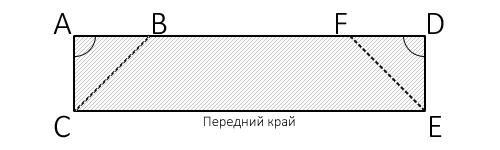
<style>
.page{position:relative;width:500px;height:150px;background:#ffffff}
.page>*{position:absolute;margin:0}
.t1{font:33.3px "Calibri-Light";color:#000000}
.t2{font:14.4px "Calibri-Light";color:#000000}
</style>
<div class="page">
<p class="t1" style="left:53px;top:13px;width:19px;height:21px">A</p>
<p class="t1" style="left:153px;top:13px;width:14px;height:21px">B</p>
<p class="t1" style="left:336px;top:13px;width:11px;height:21px">F</p>
<p class="t1" style="left:428px;top:13px;width:16px;height:21px">D</p>
<p class="t1" style="left:54px;top:115px;width:16px;height:23px">C</p>
<p class="t2" style="left:204px;top:116px;width:91px;height:13px">Передний край</p>
<p class="t1" style="left:430px;top:116px;width:12px;height:21px">E</p>
</div>
